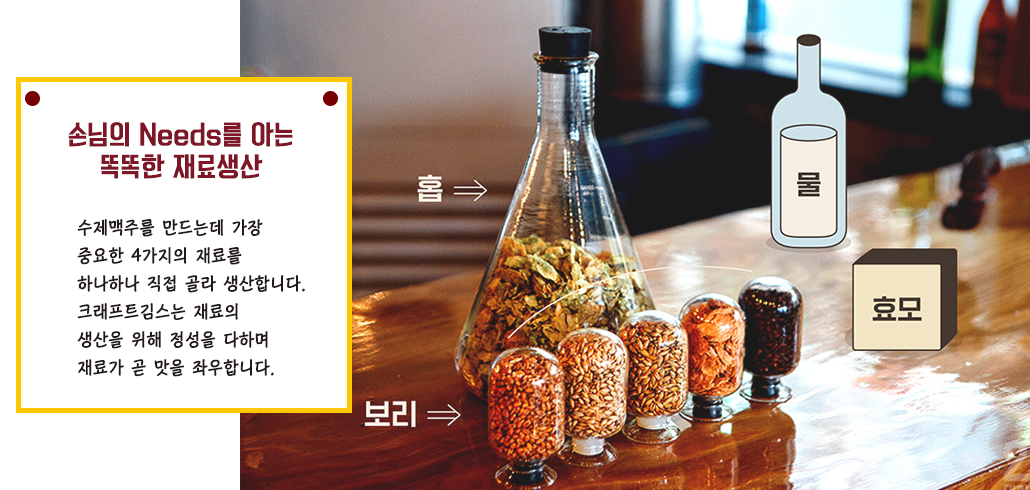
<style>
.page{position:relative;width:1030px;height:490px;background:#ffffff}
.page>*{position:absolute;margin:0}
.t1{font:25px/32px "KoreanYNMYT-M";color:#7e1628}
.t2{font:18px/28px "KoreanCNM-M";color:#22191b}
</style>
<div class="page">
<p class="t1" style="left:68px;top:122px;width:225px;height:57px;text-align:center">손님의 Needs를 아는 <br>똑똑한 재료생산</p>
<p class="t2" style="left:77px;top:219px;width:228px;height:158px">수제맥주를 만드는데 가장 <br>중요한 4가지의 재료를 <br>하나하나 직접 골라 생산합니다.<br>크래프트김스는 재료의 <br>생산을 위해 정성을 다하며 <br>재료가 곧 맛을 좌우합니다.</p>
</div>
